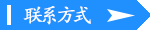
<style>
.page{position:relative;width:150px;height:30px;background:#2190ff}
.page>*{position:absolute;margin:0}
.t1{font:20px "KaiTi";letter-spacing:-0.22em;color:#ffffff;font-weight:bold}
</style>
<div class="page">
<p class="t1" style="left:23px;top:6px;width:68px;height:19px">联系方式</p>
</div>
